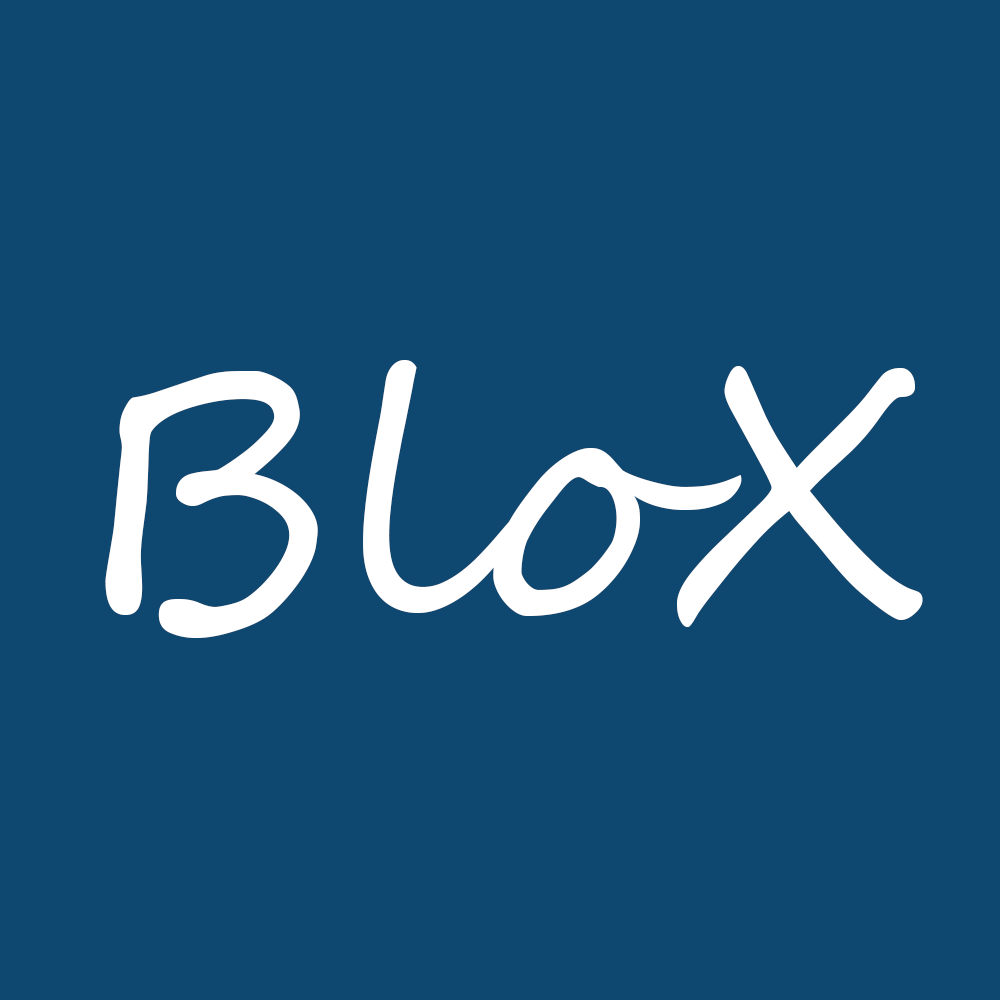
<style>
.page{position:relative;width:1000px;height:1000px;background:#0e476f}
.page>*{position:absolute;margin:0}
.t1{font:341.7px "SegoeScript";color:#ffffff}
</style>
<div class="page">
<p class="t1" style="left:105px;top:360px;width:818px;height:278px">BloX</p>
</div>
